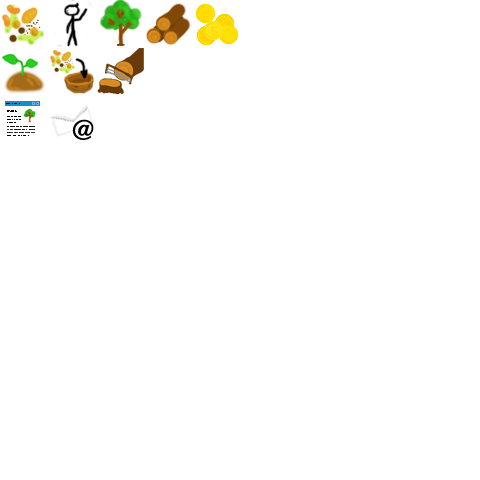
<style>
.page{position:relative;width:480px;height:480px;background:#ffffff}
.page>*{position:absolute;margin:0}
.t1{font:27.1px "Optima-Medium";color:#000000;font-weight:bold}
</style>
<div class="page">
<p class="t1" style="left:72px;top:119px;width:22px;height:21px">@</p>
</div>
